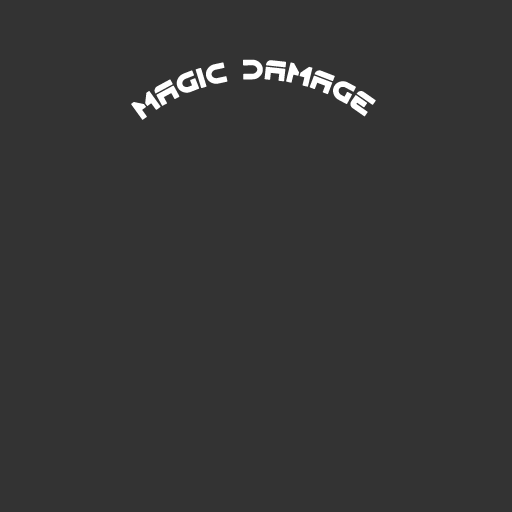
<style>
.page{position:relative;width:512px;height:512px;background:#333333}
.page>*{position:absolute;margin:0}
.t1{font:36px "Flynn";color:#ffffff}
</style>
<div class="page">
<p class="t1" style="left:131px;top:59px;width:245px;height:61px">magic damage</p>
</div>
